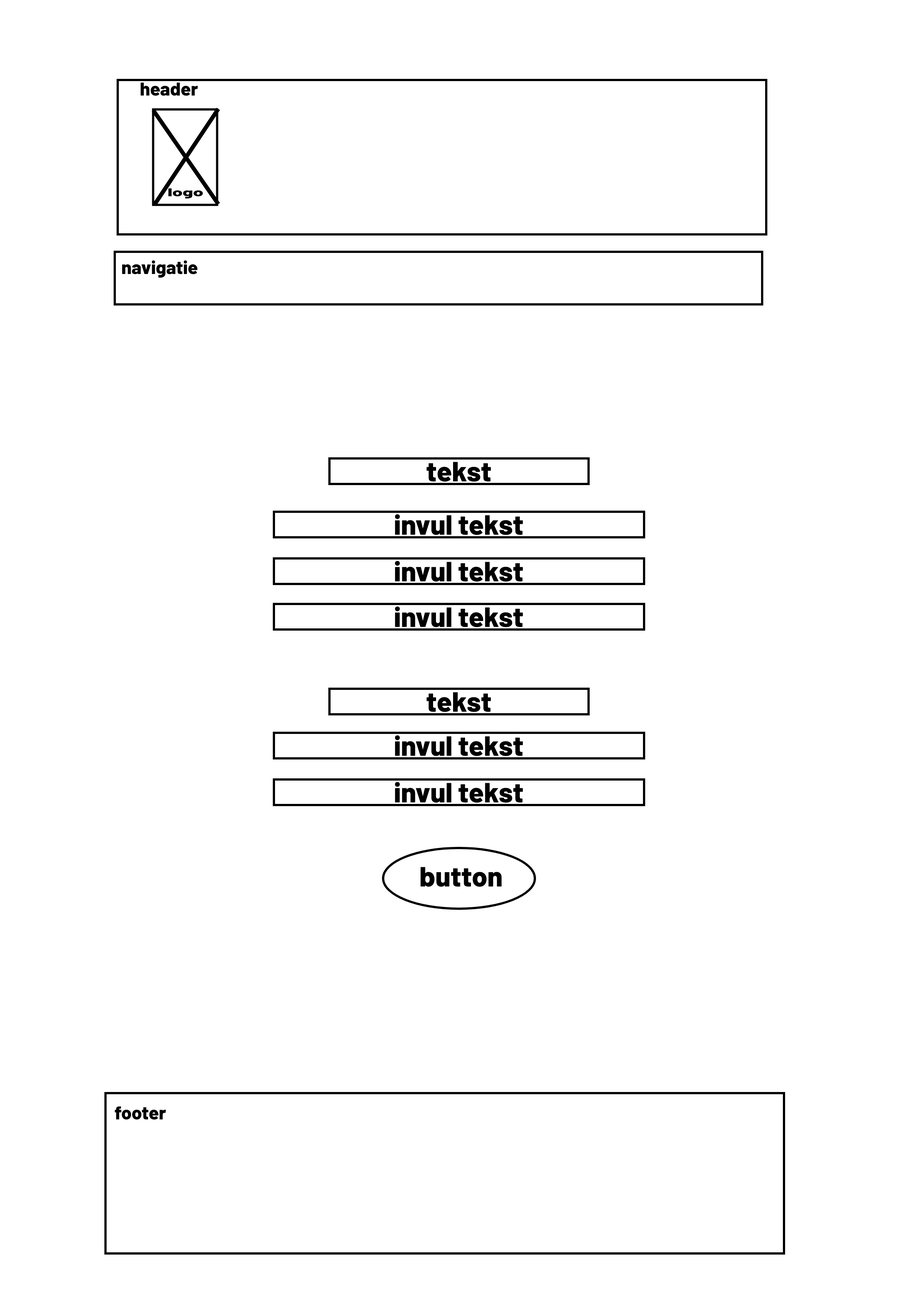
<style>
.page{position:relative;width:918px;height:1299px;background:#ffffff}
.page>*{position:absolute;margin:0}
.t1{font:18.5px "Barlow-ExtraBold";color:#000000}
.t2{font:11.2px "Barlow-ExtraBold";color:#000000;scale:1.66 1}
.t3{font:27.8px "Barlow-ExtraBold";color:#000000}
</style>
<div class="page">
<p class="t1" style="left:141px;top:83px;width:57px;height:13px">header</p>
<p class="t2" style="left:168px;top:188px;width:35px;height:10px">logo</p>
<p class="t1" style="left:122px;top:260px;width:76px;height:18px">navigatie</p>
<p class="t3" style="left:426px;top:462px;width:65px;height:20px">tekst</p>
<p class="t3" style="left:395px;top:514px;width:128px;height:21px">invul tekst</p>
<p class="t3" style="left:395px;top:561px;width:128px;height:21px">invul tekst</p>
<p class="t3" style="left:395px;top:606px;width:128px;height:21px">invul tekst</p>
<p class="t3" style="left:426px;top:692px;width:65px;height:20px">tekst</p>
<p class="t3" style="left:395px;top:735px;width:128px;height:21px">invul tekst</p>
<p class="t3" style="left:395px;top:782px;width:128px;height:21px">invul tekst</p>
<p class="t3" style="left:421px;top:867px;width:81px;height:20px">button</p>
<p class="t1" style="left:115px;top:1106px;width:51px;height:14px">footer</p>
</div>
